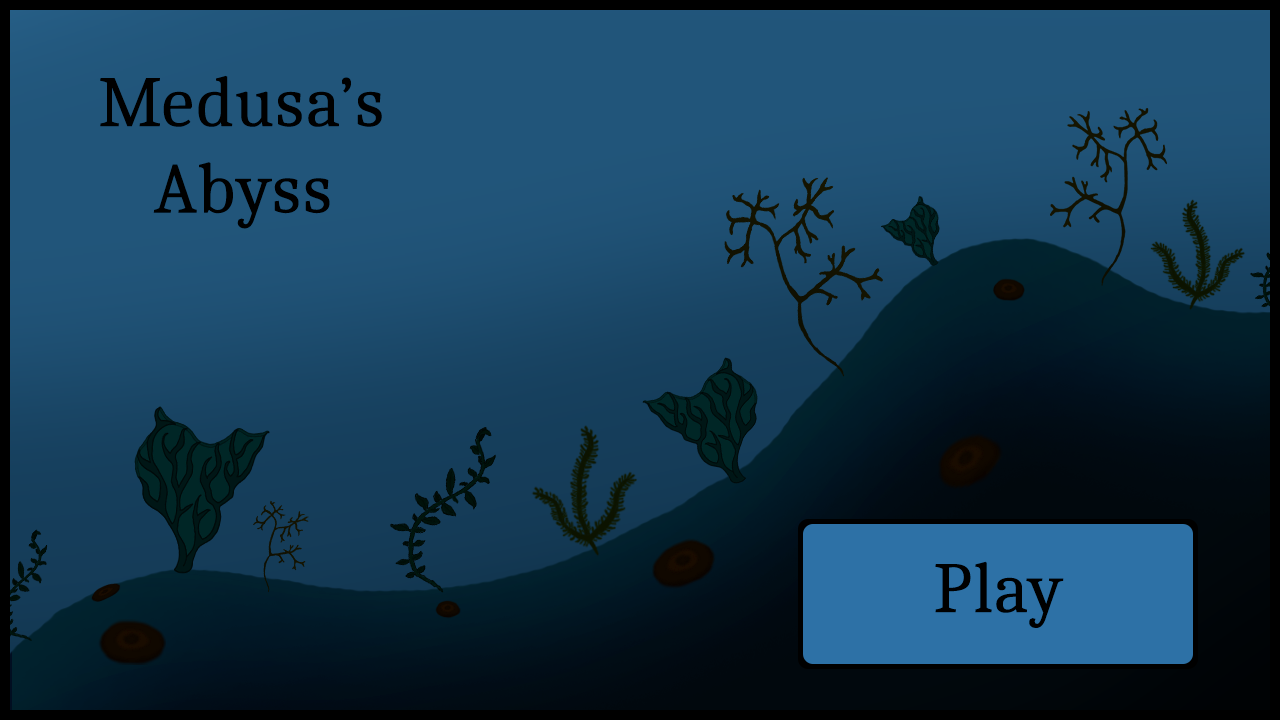
<style>
.page{position:relative;width:1280px;height:720px}
.page>*{position:absolute;margin:0}
.t1{font:72px "Caladea-Regular";color:#000000}
</style>
<div class="page">
<p class="t1" style="left:100px;top:75px;width:282px;height:154px;text-align:center">Medusa’s<br>Abyss</p>
<p class="t1" style="left:935px;top:561px;width:129px;height:67px">Play</p>
</div>
